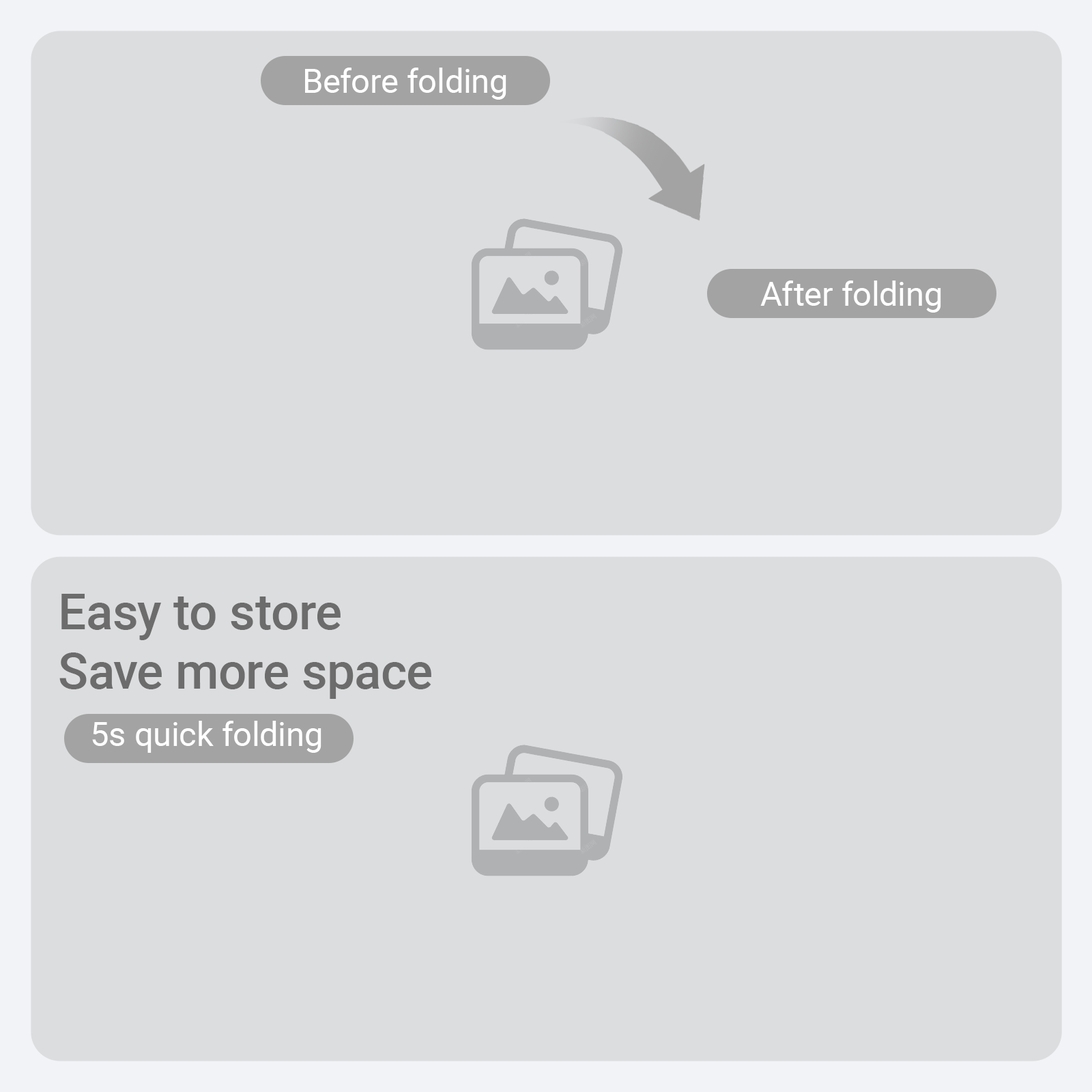
<style>
.page{position:relative;width:1092px;height:1092px;background:#dcdddf}
.page>*{position:absolute;margin:0}
.t1{font:33.5px "Roboto-Regular";color:#ffffff}
.t2{font:49.5px "Roboto-Medium";color:#6c6c6c}
</style>
<div class="page">
<p class="t1" style="left:305px;top:68px;width:201px;height:32px">Before folding</p>
<p class="t1" style="left:760px;top:281px;width:181px;height:32px">After folding</p>
<p class="t2" style="left:59px;top:594px;width:372px;height:105px">Easy to store<br>Save more space</p>
<p class="t1" style="left:92px;top:721px;width:229px;height:32px">5s quick folding</p>
</div>
